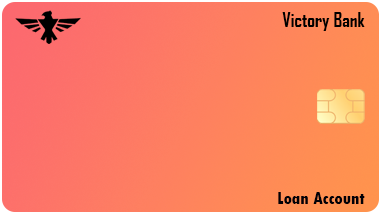
<style>
.page{position:relative;width:380px;height:213px}
.page>*{position:absolute;margin:0}
.t1{font:19px "AgencyFB-Bold";color:#000000}
.t2{font:18px "TwCenMT-CondensedExtraBold";color:#010007}
</style>
<div class="page">
<p class="t1" style="left:282px;top:12px;width:83px;height:19px">Victory Bank</p>
<p class="t2" style="left:278px;top:192px;width:87px;height:12px">Loan Account</p>
</div>
